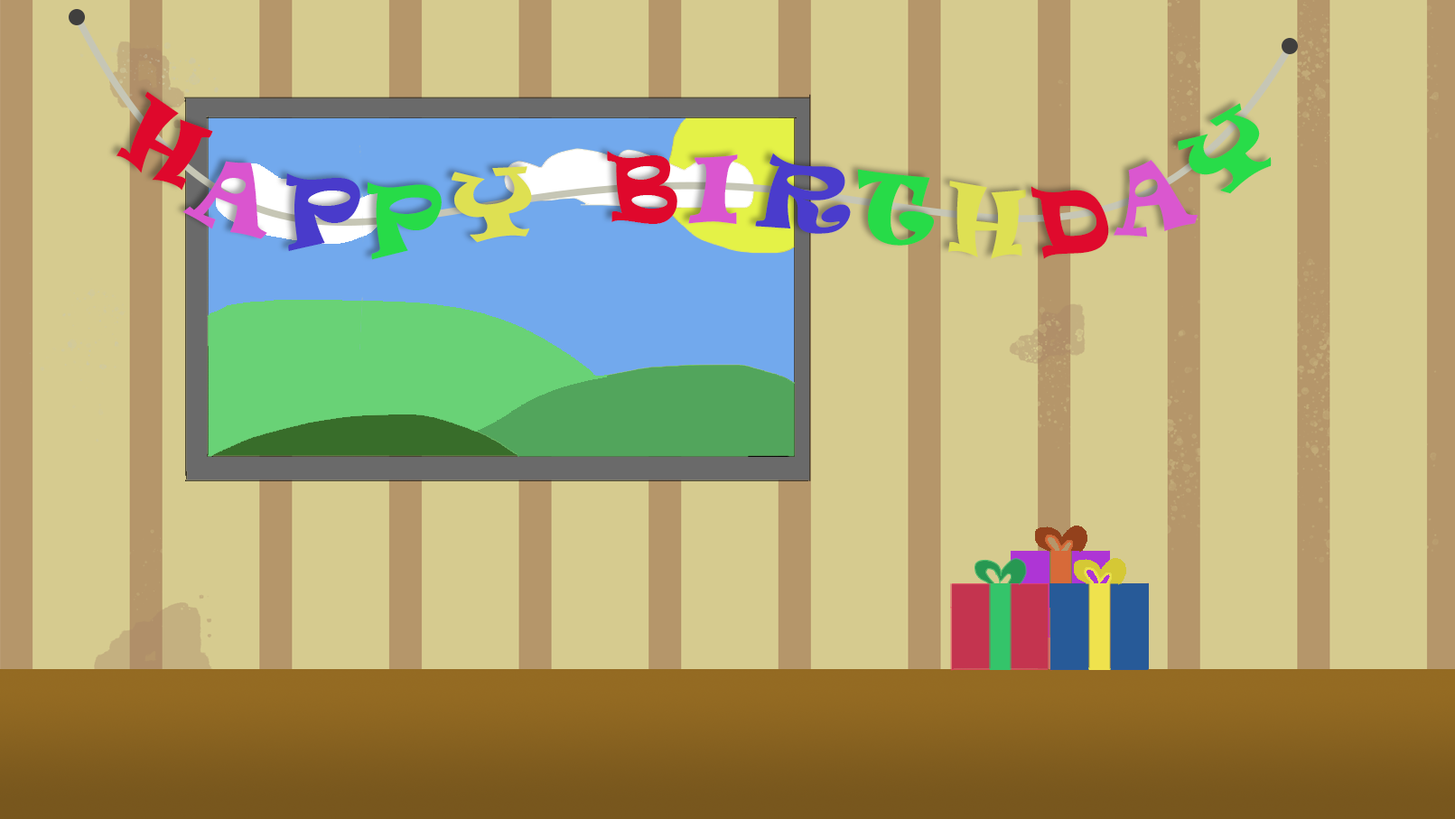
<style>
.page{position:relative;width:1455px;height:819px;background:#d6cb8f}
.page>*{position:absolute;margin:0}
.t1{font:88.5px "Ravie";letter-spacing:0.02em;color:#df082c}
.t2{font:88.5px "Ravie";letter-spacing:0.02em;color:#28dc49}
.t3{font:88.5px "Ravie";letter-spacing:0.02em;color:#da55cf}
.t4{font:88.5px "Ravie";letter-spacing:0.02em;color:#4a3ccc}
.t5{font:88.5px "Ravie";letter-spacing:0.02em;color:#da57cf}
.t6{font:88.5px "Ravie";letter-spacing:0.02em;color:#493bcb}
.t7{font:88.5px "Ravie";letter-spacing:0.02em;color:#dee052}
.t8{font:88.5px "Ravie";letter-spacing:0.02em;color:#27db48}
.t9{font:88.5px "Ravie";letter-spacing:0.02em;color:#dee053}
.t10{font:88.5px "Ravie";letter-spacing:0.02em;color:#df0a2d}
</style>
<div class="page">
<p class="t1" style="left:116px;top:91px;width:97px;height:100px;rotate:30deg">H</p>
<p class="t2" style="left:1178px;top:103px;width:94px;height:91px;rotate:-34deg">Y</p>
<p class="t3" style="left:182px;top:161px;width:85px;height:78px;rotate:16deg">A</p>
<p class="t1" style="left:607px;top:151px;width:71px;height:73px">B</p>
<p class="t3" style="left:688px;top:154px;width:50px;height:70px;rotate:3deg">I</p>
<p class="t4" style="left:755px;top:153px;width:96px;height:81px;rotate:4deg">R</p>
<p class="t5" style="left:1114px;top:160px;width:84px;height:78px;rotate:-12deg">A</p>
<p class="t6" style="left:286px;top:173px;width:74px;height:78px">P</p>
<p class="t7" style="left:452px;top:166px;width:80px;height:77px;rotate:-6deg">Y</p>
<p class="t8" style="left:857px;top:169px;width:77px;height:77px;rotate:4deg">T</p>
<p class="t8" style="left:367px;top:182px;width:75px;height:78px;rotate:-2deg">P</p>
<p class="t9" style="left:949px;top:181px;width:77px;height:78px;rotate:5deg">H</p>
<p class="t10" style="left:1031px;top:186px;width:78px;height:73px;rotate:-6deg">D</p>
</div>
